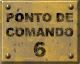
<style>
.page{position:relative;width:80px;height:64px}
.page>*{position:absolute;margin:0}
.t1{font:12px/14.7px "Arial-Black";letter-spacing:-0.015em;text-transform:uppercase}
.t2{font:20px/20px "Arial-Black";letter-spacing:-0.055em;text-transform:uppercase}
</style>
<div class="page">
<p class="t1" style="left:6px;top:13px;width:68px;height:44px;text-align:center">Ponto de<br>comando<br><span class="t2">6</span></p>
</div>
